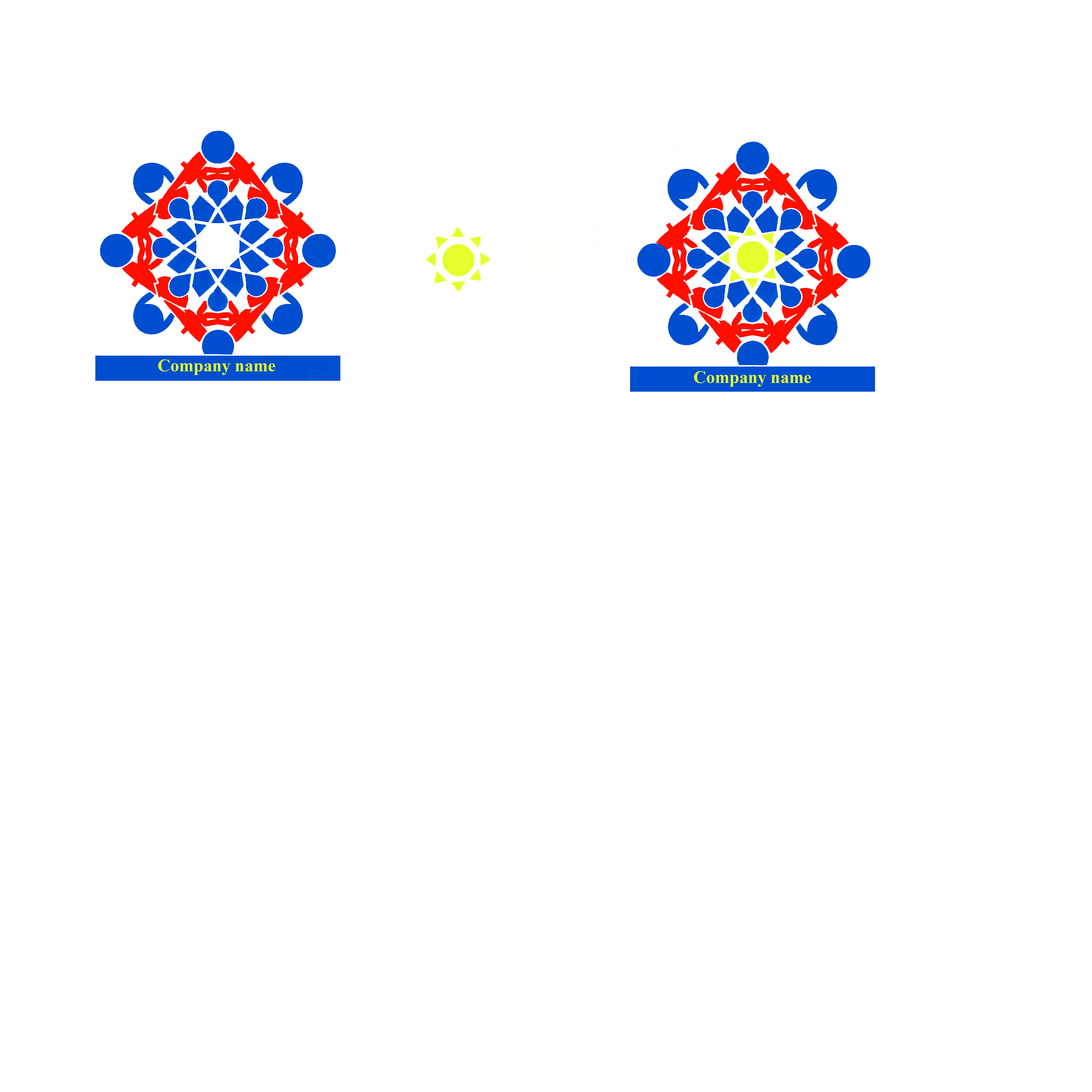
<style>
.page{position:relative;width:1092px;height:1092px;background:#ffffff}
.page>*{position:absolute;margin:0}
.t1{font:17.5px "TimesNewRomanPS-BoldMT";color:#e4ff2c}
</style>
<div class="page">
<p class="t1" style="left:158px;top:359px;width:117px;height:16px">Company name</p>
</div>
